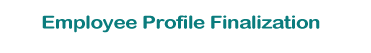
<style>
.page{position:relative;width:371px;height:53px;background:#ffffff}
.page>*{position:absolute;margin:0}
.t1{font:18px "ArialRoundedMTBold";letter-spacing:-0.02em;color:#0a7c7d;scale:1.15 1}
.t2{font:15.6px "ArialRoundedMTBold";letter-spacing:-0.02em;color:#0a7c7d;scale:1.15 1}
</style>
<div class="page">
<p class="t1" style="left:42px;top:15px;width:278px;height:18px"><span class="t2">                                                              </span>Employee Profile Finalization</p>
</div>
